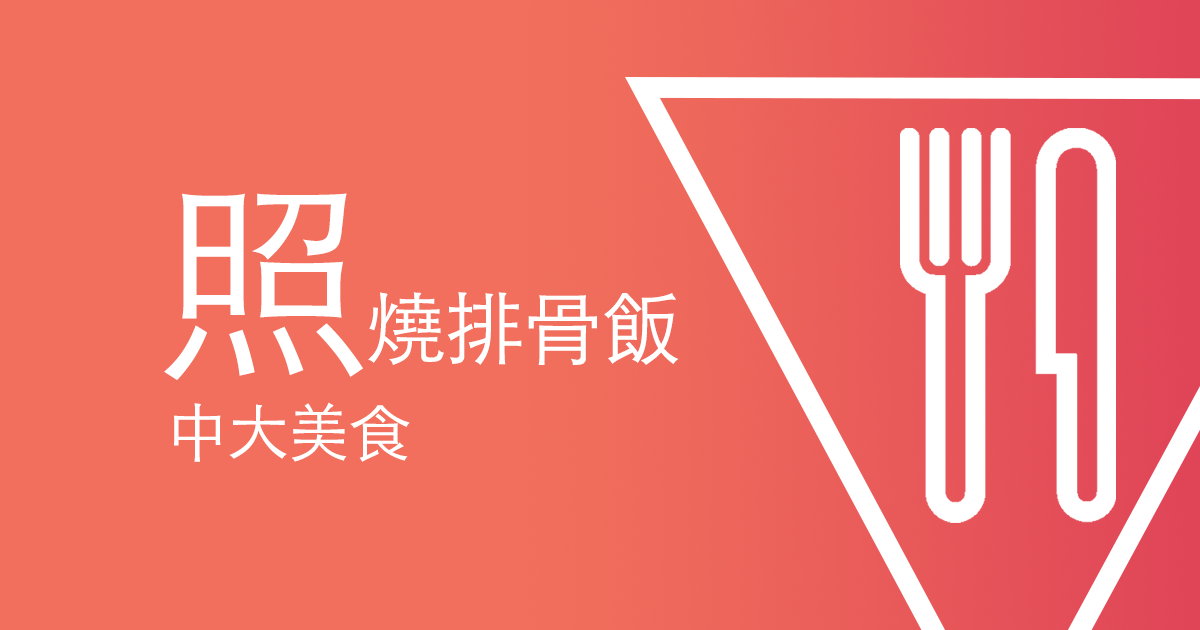
<style>
.page{position:relative;width:1200px;height:630px;background:#f16f5c}
.page>*{position:absolute;margin:0}
.t1{font:80px "STHeitiTC-Light";letter-spacing:-0.02em;color:#ffffff}
.t2{font:213.3px "STHeitiTC-Light";letter-spacing:-0.02em;color:#ffffff}
.t3{font:62.2px "STHeitiTC-Light";letter-spacing:-0.02em;color:#ffffff}
</style>
<div class="page">
<p class="t1" style="left:164px;top:193px;width:515px;height:187px"><span class="t2">照</span>燒排骨飯</p>
<p class="t3" style="left:174px;top:402px;width:236px;height:60px">中大美食</p>
</div>
